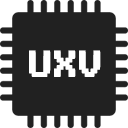
<style>
.page{position:relative;width:128px;height:128px;background:#212121}
.page>*{position:absolute;margin:0}
.t1{font:38px "BLOXAT";color:#ffffff}
</style>
<div class="page">
<p class="t1" style="left:29px;top:50px;width:72px;height:27px">UXV</p>
</div>
